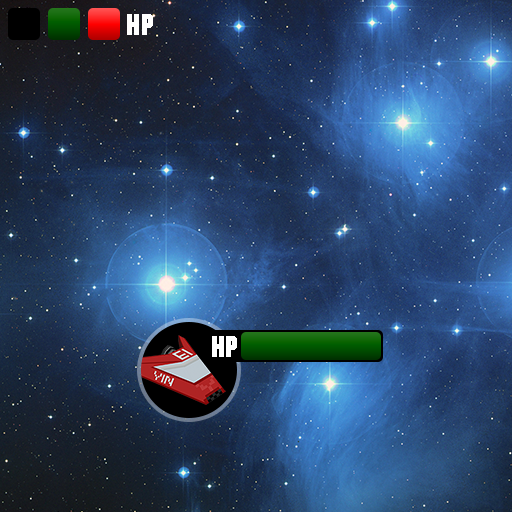
<style>
.page{position:relative;width:512px;height:512px}
.page>*{position:absolute;margin:0}
.t1{font:28.3px "MachineStd";letter-spacing:0.05em;color:#ffffff;font-weight:bold;scale:0.94 1}
</style>
<div class="page">
<p class="t1" style="left:127px;top:14px;width:26px;height:21px">HP</p>
<p class="t1" style="left:212px;top:336px;width:25px;height:21px">HP</p>
</div>
